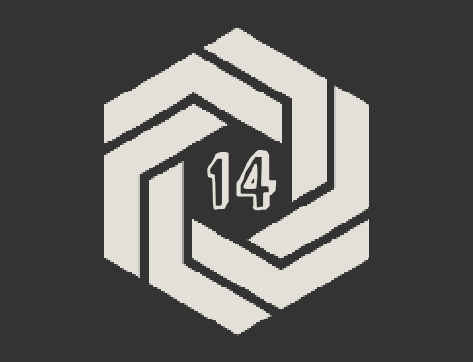
<style>
.page{position:relative;width:473px;height:362px;background:#333333}
.page>*{position:absolute;margin:0}
.t1{font:94.1px "ComicZineOT";color:#e3dfd9}
</style>
<div class="page">
<p class="t1" style="left:207px;top:150px;width:70px;height:61px">14</p>
</div>
